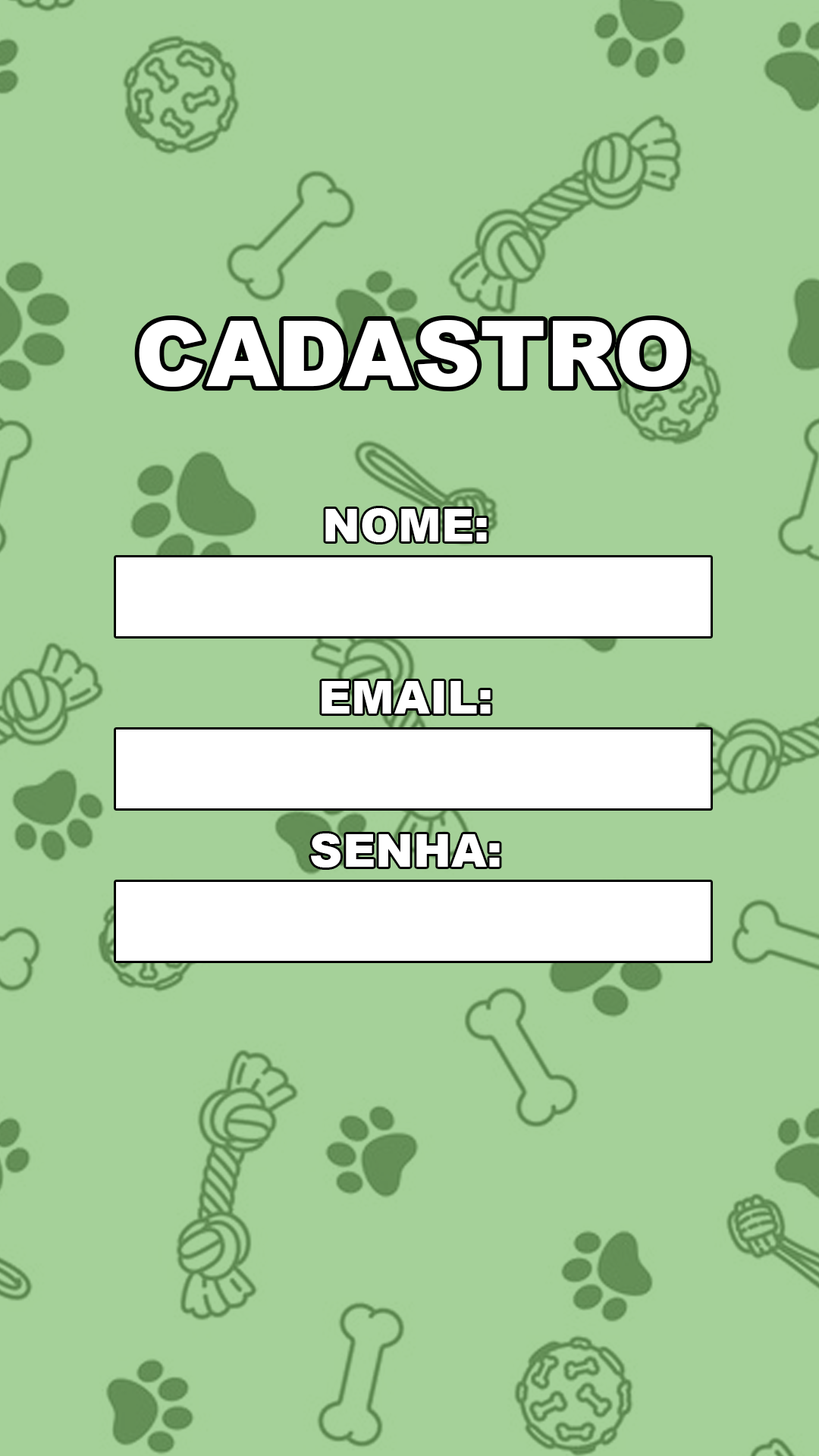
<style>
.page{position:relative;width:819px;height:1456px;background:#a5d199}
.page>*{position:absolute;margin:0}
.t1{font:91px "Arial-Black";color:#ffffff}
.t2{font:45.5px "Arial-Black";color:#ffffff}
</style>
<div class="page">
<p class="t1" style="left:139px;top:320px;width:548px;height:67px">CADASTRO</p>
<p class="t2" style="left:325px;top:508px;width:162px;height:34px">NOME:</p>
<p class="t2" style="left:322px;top:681px;width:169px;height:33px">EMAIL:</p>
<p class="t2" style="left:311px;top:833px;width:189px;height:35px">SENHA:</p>
</div>
